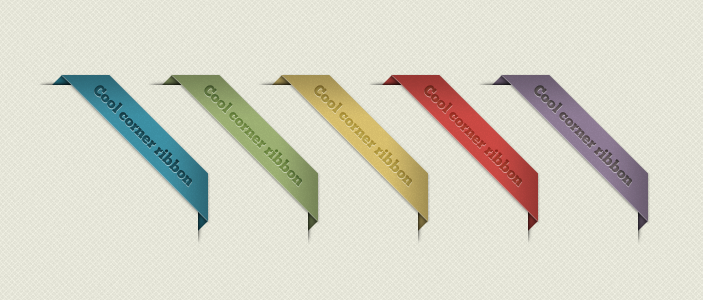
<style>
.page{position:relative;width:703px;height:300px}
.page>*{position:absolute;margin:0}
.t1{font:15px "ChunkFive";color:#194a56}
.t2{font:15px "ChunkFive";color:#6c8543}
.t3{font:15px "ChunkFive";color:#ac9440}
.t4{font:15px "ChunkFive";color:#9c3627}
.t5{font:15px "ChunkFive";color:#5d5357}
</style>
<div class="page">
<p class="t1" style="left:94px;top:85px;width:98px;height:102px;rotate:45deg">Cool corner ribbon</p>
<p class="t2" style="left:204px;top:85px;width:98px;height:102px;rotate:45deg">Cool corner ribbon</p>
<p class="t3" style="left:314px;top:85px;width:98px;height:102px;rotate:45deg">Cool corner ribbon</p>
<p class="t4" style="left:424px;top:85px;width:98px;height:102px;rotate:45deg">Cool corner ribbon</p>
<p class="t5" style="left:534px;top:85px;width:98px;height:102px;rotate:45deg">Cool corner ribbon</p>
</div>
